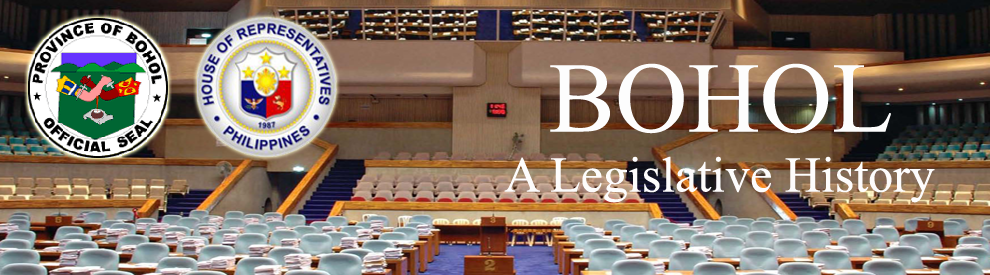
<style>
.page{position:relative;width:990px;height:275px}
.page>*{position:absolute;margin:0}
.t1{font:50px "TimesNewRomanPSMT";color:#fdfcfc}
.t2{font:100px "TimesNewRomanPSMT";color:#fdfdfd}
</style>
<div class="page">
<p class="t1" style="left:504px;top:63px;width:431px;height:140px;text-align:center"><span class="t2">BOHOL<br></span>A Legislative History</p>
</div>
